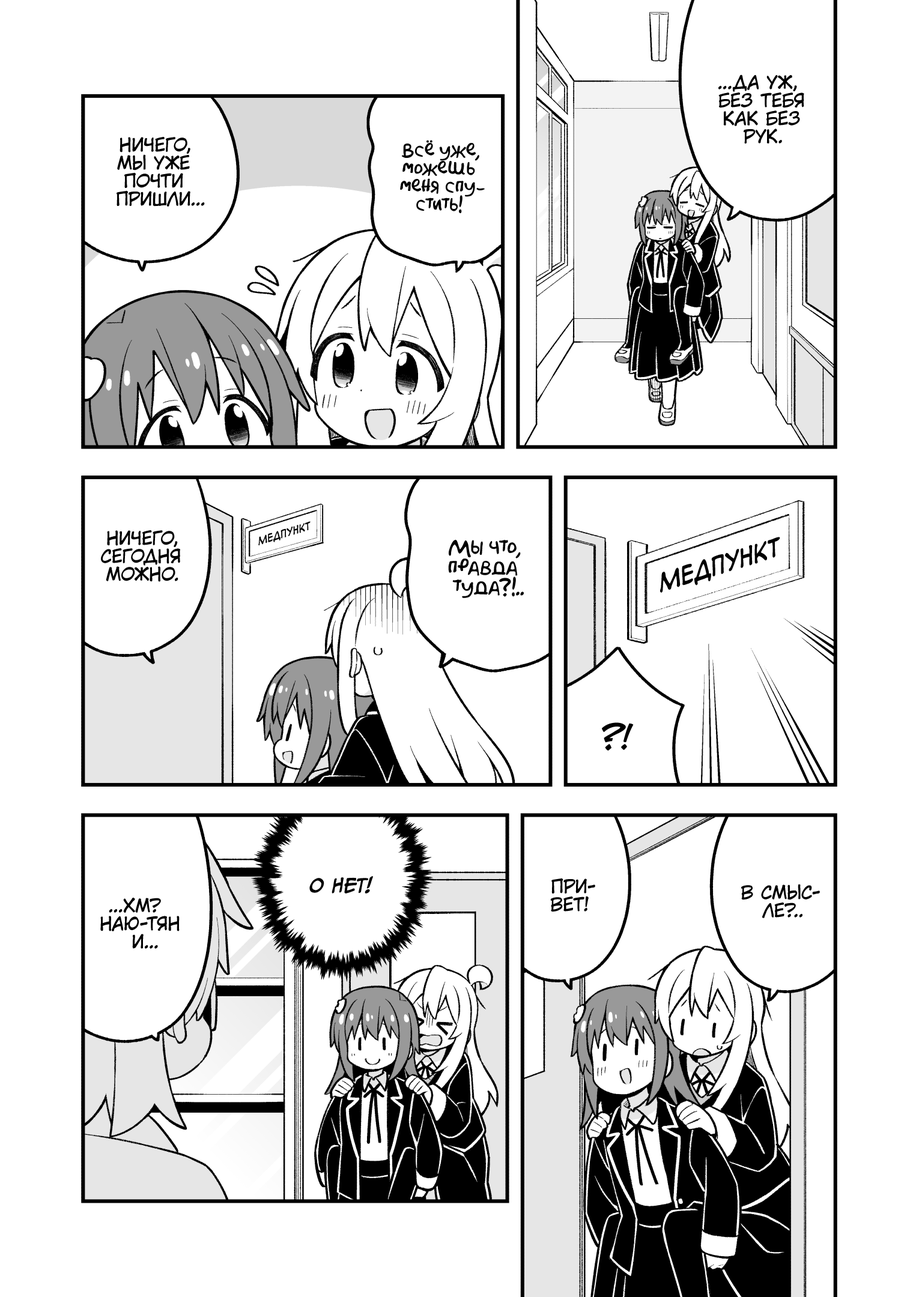
<style>
.page{position:relative;width:919px;height:1297px;background:#ffffff}
.page>*{position:absolute;margin:0}
.t1{font:18px "KuraiVoice2";color:#000000;text-transform:uppercase}
.t2{font:18px "AkbarPlain";color:#000000}
.t3{font:10.8px "v_CCMonologous";color:#000000;text-transform:uppercase;scale:0.92 1}
.t4{font:19.8px "AkbarPlain";color:#000000}
.t5{font:25.2px "v_CCMonologous";color:#000000;text-transform:uppercase;scale:0.92 1}
.t6{font:32.4px "v_CCJeffCampbell";color:#000000;text-transform:uppercase}
.t7{font:18px "CCMeanwhile";color:#000000;text-transform:uppercase;font-weight:bold;font-style:italic}
</style>
<div class="page">
<p class="t1" style="left:718px;top:74px;width:86px;height:70px;text-align:center">...Да уж,<br>без тебя<br>как без<br>рук.</p>
<p class="t1" style="left:117px;top:137px;width:88px;height:70px;text-align:center">Ничего,<br>мы уже<br>почти<br>пришли...</p>
<p class="t2" style="left:400px;top:140px;width:85px;height:73px;text-align:center">Всё уже,<br>можешь<br>меня спу-<br>стить!</p>
<p class="t3" style="left:258px;top:521px;width:53px;height:25px;rotate:-17deg">Медпункт</p>
<p class="t1" style="left:101px;top:530px;width:79px;height:52px;text-align:center">Ничего,<br>сегодня<br>можно.</p>
<p class="t4" style="left:448px;top:540px;width:76px;height:58px;text-align:center">Мы что,<br>правда<br>туда?!..</p>
<p class="t5" style="left:660px;top:537px;width:120px;height:56px;rotate:-17deg">Медпункт</p>
<p class="t6" style="left:602px;top:723px;width:32px;height:28px">?!</p>
<p class="t7" style="left:309px;top:876px;width:64px;height:18px">О нет!</p>
<p class="t1" style="left:550px;top:878px;width:45px;height:34px;text-align:center">При-<br>вет!</p>
<p class="t1" style="left:741px;top:884px;width:79px;height:34px;text-align:center">В смыс-<br>ле?..</p>
<p class="t1" style="left:100px;top:898px;width:80px;height:51px;text-align:center">...Хм?<br>Наю-тян<br>и...</p>
</div>
